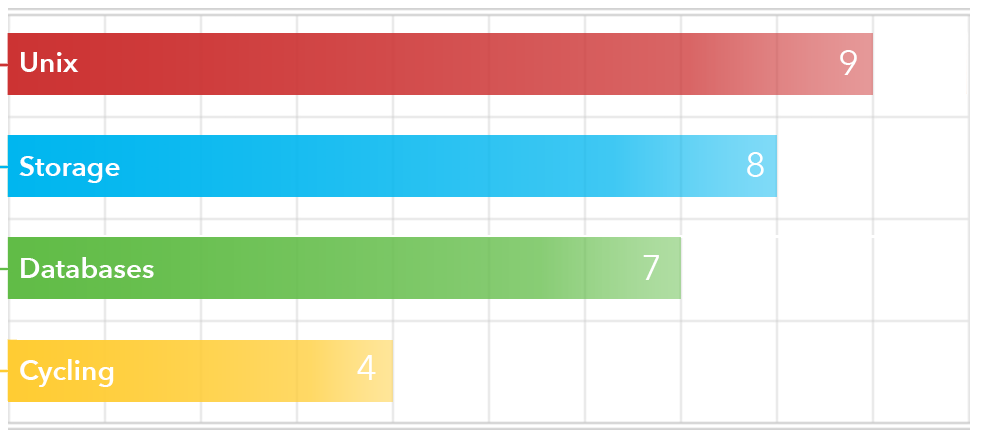
<style>
.page{position:relative;width:982px;height:442px;background:#ffffff}
.page>*{position:absolute;margin:0}
.t1{font:28px "AvenirNext-DemiBold";color:#ffffff}
.t2{font:36px "AvenirNext-Regular";color:#ffffff}
</style>
<div class="page">
<p class="t1" style="left:21px;top:52px;width:58px;height:20px">Unix</p>
<p class="t2" style="left:840px;top:50px;width:17px;height:25px">9</p>
<p class="t1" style="left:19px;top:156px;width:101px;height:27px">Storage</p>
<p class="t2" style="left:747px;top:152px;width:17px;height:25px">8</p>
<p class="t1" style="left:21px;top:257px;width:133px;height:21px">Databases</p>
<p class="t2" style="left:643px;top:255px;width:16px;height:25px">7</p>
<p class="t1" style="left:20px;top:359px;width:94px;height:28px">Cycling</p>
<p class="t2" style="left:357px;top:355px;width:19px;height:25px">4</p>
</div>
